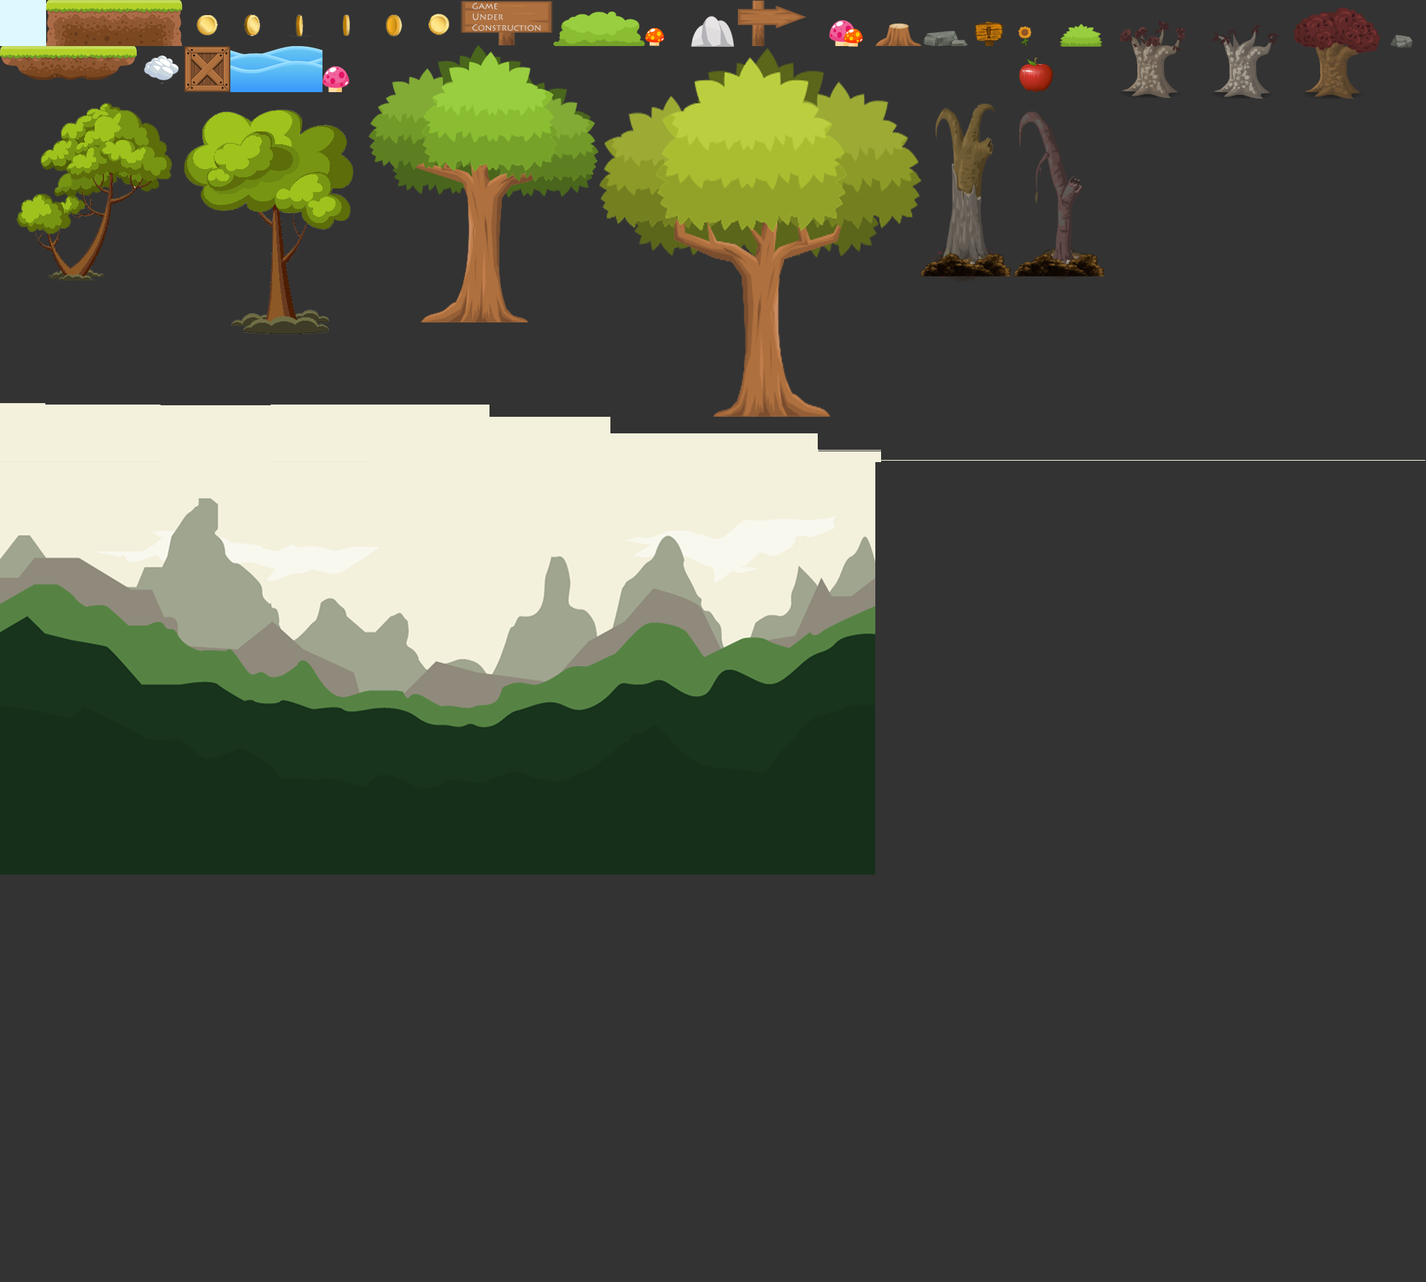
<style>
.page{position:relative;width:1426px;height:1282px;background:#333333}
.page>*{position:absolute;margin:0}
.t1{font:9px "LithosPro-Regular";color:#e3e2e7}
</style>
<div class="page">
<p class="t1" style="left:472px;top:2px;width:69px;height:29px">Game <br>Under<br>Construction</p>
</div>
